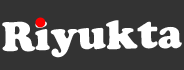
<style>
.page{position:relative;width:184px;height:70px;background:#333333}
.page>*{position:absolute;margin:0}
.t1{font:43px "CooperBlack";color:#ff0000}
.t2{font:43px "CooperBlack";color:#ffffff}
</style>
<div class="page">
<p class="t1" style="left:35px;top:17px;width:11px;height:11px;rotate:-1deg">.</p>
<p class="t2" style="left:2px;top:20px;width:180px;height:38px;rotate:-1deg">Riyukta</p>
</div>
